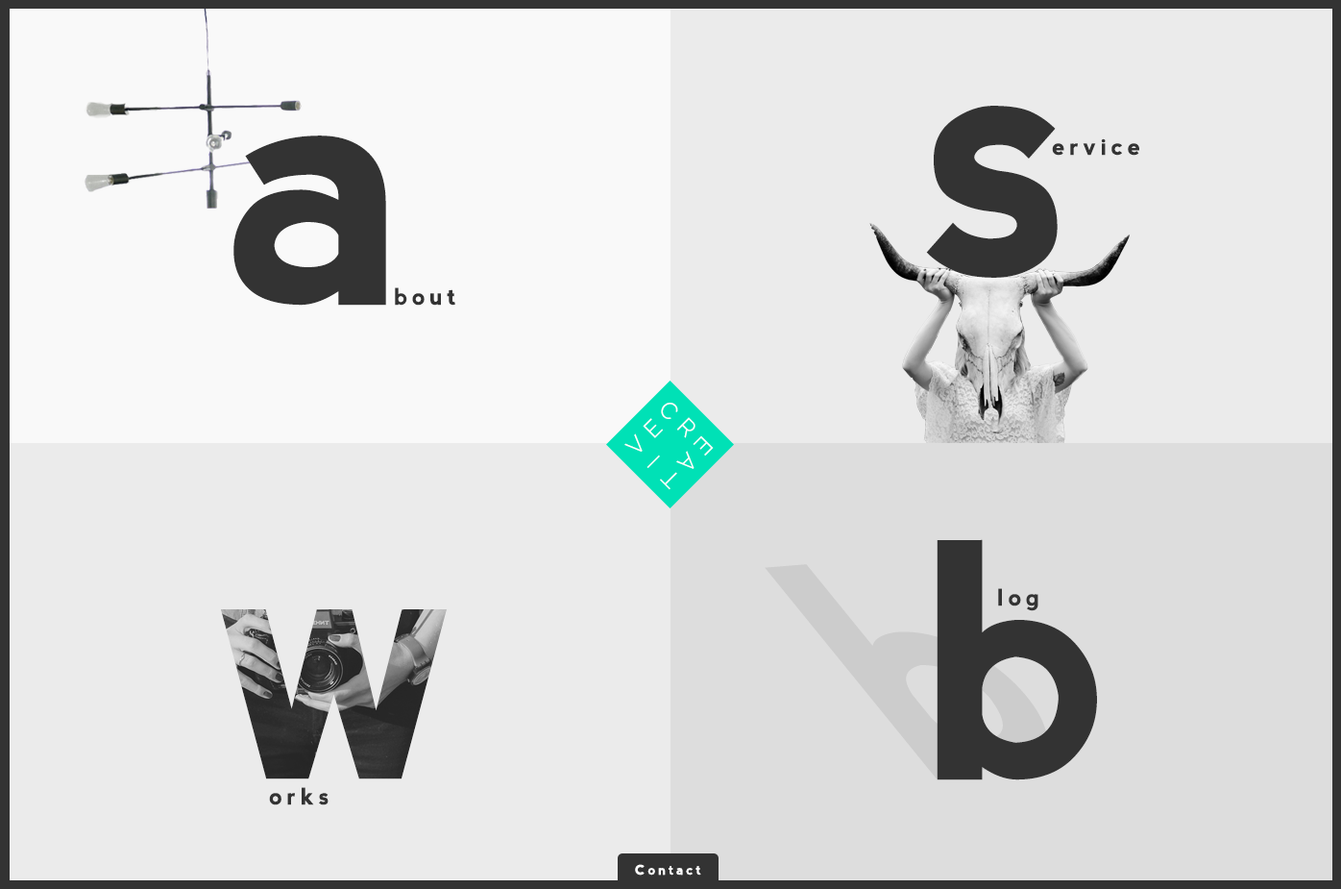
<style>
.page{position:relative;width:1341px;height:889px;background:#ebebeb}
.page>*{position:absolute;margin:0}
.t1{font:345.9px "nevis-Bold";letter-spacing:0.2em;color:#333333}
.t2{font:23.1px "nevis-Bold";letter-spacing:0.2em;color:#333333}
.t3{font:23.1px "Raleway-Light";color:#ffffff}
.t4{font:326.7px "nevis-Bold";letter-spacing:0.2em;color:#333333}
.t5{font:13.5px "nevis-Bold";letter-spacing:0.2em;color:#ffffff}
</style>
<div class="page">
<p class="t1" style="left:926px;top:106px;width:132px;height:172px">s</p>
<p class="t1" style="left:234px;top:135px;width:152px;height:171px">a</p>
<p class="t2" style="left:1052px;top:138px;width:88px;height:18px">ervice</p>
<p class="t2" style="left:395px;top:287px;width:60px;height:19px">bout</p>
<p class="t3" style="left:661px;top:403px;width:17px;height:16px;rotate:45deg">C</p>
<p class="t3" style="left:643px;top:418px;width:20px;height:20px;rotate:-45deg">E</p>
<p class="t3" style="left:677px;top:417px;width:19px;height:21px;rotate:45deg">R</p>
<p class="t3" style="left:625px;top:433px;width:18px;height:19px;rotate:-45deg">V</p>
<p class="t3" style="left:693px;top:435px;width:21px;height:20px;rotate:135deg">E</p>
<p class="t3" style="left:647px;top:455px;width:13px;height:13px;rotate:-135deg">I</p>
<p class="t3" style="left:677px;top:451px;width:18px;height:18px;rotate:135deg">A</p>
<p class="t3" style="left:660px;top:472px;width:17px;height:18px;rotate:-135deg">T</p>
<p class="t4" style="left:937px;top:539px;width:160px;height:241px">b</p>
<p class="t2" style="left:998px;top:588px;width:41px;height:23px">log</p>
<p class="t1" style="left:221px;top:609px;width:226px;height:170px">w</p>
<p class="t2" style="left:269px;top:787px;width:60px;height:18px">orks</p>
<p class="t5" style="left:635px;top:864px;width:66px;height:11px">Contact</p>
</div>
